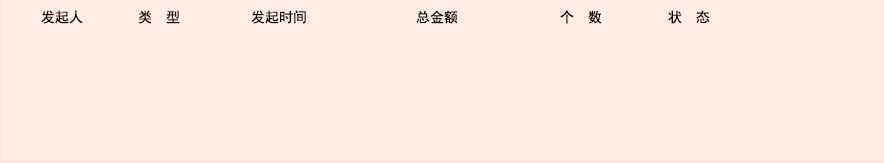
<style>
.page{position:relative;width:884px;height:163px;background:#ffece5}
.page>*{position:absolute;margin:0}
.t1{font:14px "SimHei";color:#050000}
</style>
<div class="page">
<p class="t1" style="left:41px;top:10px;width:42px;height:14px">发起人</p>
<p class="t1" style="left:139px;top:10px;width:41px;height:14px">类  型</p>
<p class="t1" style="left:251px;top:10px;width:55px;height:14px">发起时间</p>
<p class="t1" style="left:416px;top:10px;width:42px;height:14px">总金额</p>
<p class="t1" style="left:560px;top:10px;width:42px;height:14px">个  数</p>
<p class="t1" style="left:668px;top:10px;width:42px;height:14px">状  态</p>
</div>
